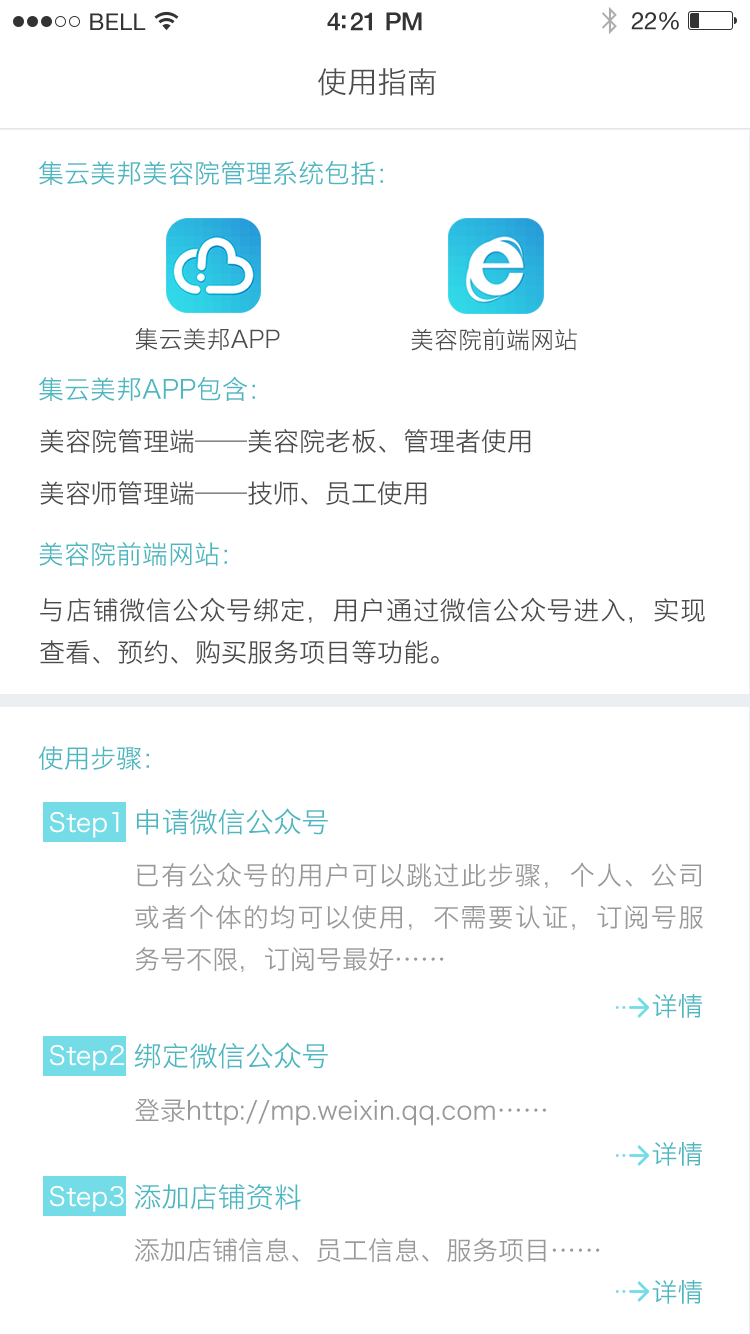
<style>
.page{position:relative;width:750px;height:1334px;background:#ffffff}
.page>*{position:absolute;margin:0}
.t1{font:30px "HiraginoSansGB-W3";color:#4d4d4d}
.t2{font:26px "HiraginoSansGB-W3";color:#4bb7c1}
.t3{font:24px "HiraginoSansGB-W3";color:#4c4c4c}
.t4{font:26px/52px "HiraginoSansGB-W3";color:#4c4c4c}
.t5{font:26px/42px "HiraginoSansGB-W3";color:#4c4c4c}
.t6{font:28px "HiraginoSansGB-W3";color:#4bb7c1}
.t7{font:26px "HiraginoSansGB-W3";color:#ffffff}
.t8{font:26px/42px "HiraginoSansGB-W3";color:#999999}
.t9{font:26px "HiraginoSansGB-W3";color:#999999}
</style>
<div class="page">
<p class="t1" style="left:318px;top:68px;width:118px;height:28px">使用指南</p>
<p class="t2" style="left:39px;top:160px;width:344px;height:26px">集云美邦美容院管理系统包括：</p>
<p class="t3" style="left:135px;top:327px;width:145px;height:23px">集云美邦APP</p>
<p class="t3" style="left:411px;top:328px;width:166px;height:23px">美容院前端网站</p>
<p class="t2" style="left:39px;top:376px;width:216px;height:25px">集云美邦APP包含：</p>
<p class="t4" style="left:40px;top:428px;width:491px;height:77px;text-align:justify">美容院管理端——美容院老板、管理者使用<br>美容师管理端——技师、员工使用</p>
<p class="t2" style="left:39px;top:541px;width:188px;height:25px">美容院前端网站：</p>
<p class="t5" style="left:40px;top:597px;width:665px;height:67px;text-align:justify">与店铺微信公众号绑定，用户通过微信公众号进入，实现查看、预约、购买服务项目等功能。</p>
<p class="t2" style="left:38px;top:746px;width:111px;height:24px">使用步骤：</p>
<p class="t6" style="left:136px;top:808px;width:192px;height:27px">申请微信公众号</p>
<p class="t7" style="left:50px;top:812px;width:69px;height:26px">Step1</p>
<p class="t8" style="left:135px;top:862px;width:568px;height:110px;text-align:justify">已有公众号的用户可以跳过此步骤，个人、公司或者个体的均可以使用，不需要认证，订阅号服务号不限，订阅号最好……</p>
<p class="t2" style="left:652px;top:994px;width:50px;height:24px">详情</p>
<p class="t7" style="left:50px;top:1045px;width:74px;height:26px">Step2</p>
<p class="t6" style="left:134px;top:1042px;width:194px;height:27px">绑定微信公众号</p>
<p class="t9" style="left:135px;top:1098px;width:411px;height:28px">登录http://mp.weixin.qq.com……</p>
<p class="t2" style="left:652px;top:1142px;width:50px;height:24px">详情</p>
<p class="t7" style="left:50px;top:1186px;width:74px;height:26px">Step3</p>
<p class="t6" style="left:134px;top:1184px;width:167px;height:26px">添加店铺资料</p>
<p class="t9" style="left:135px;top:1238px;width:465px;height:24px">添加店铺信息、员工信息、服务项目……</p>
<p class="t2" style="left:652px;top:1280px;width:50px;height:24px">详情</p>
</div>
